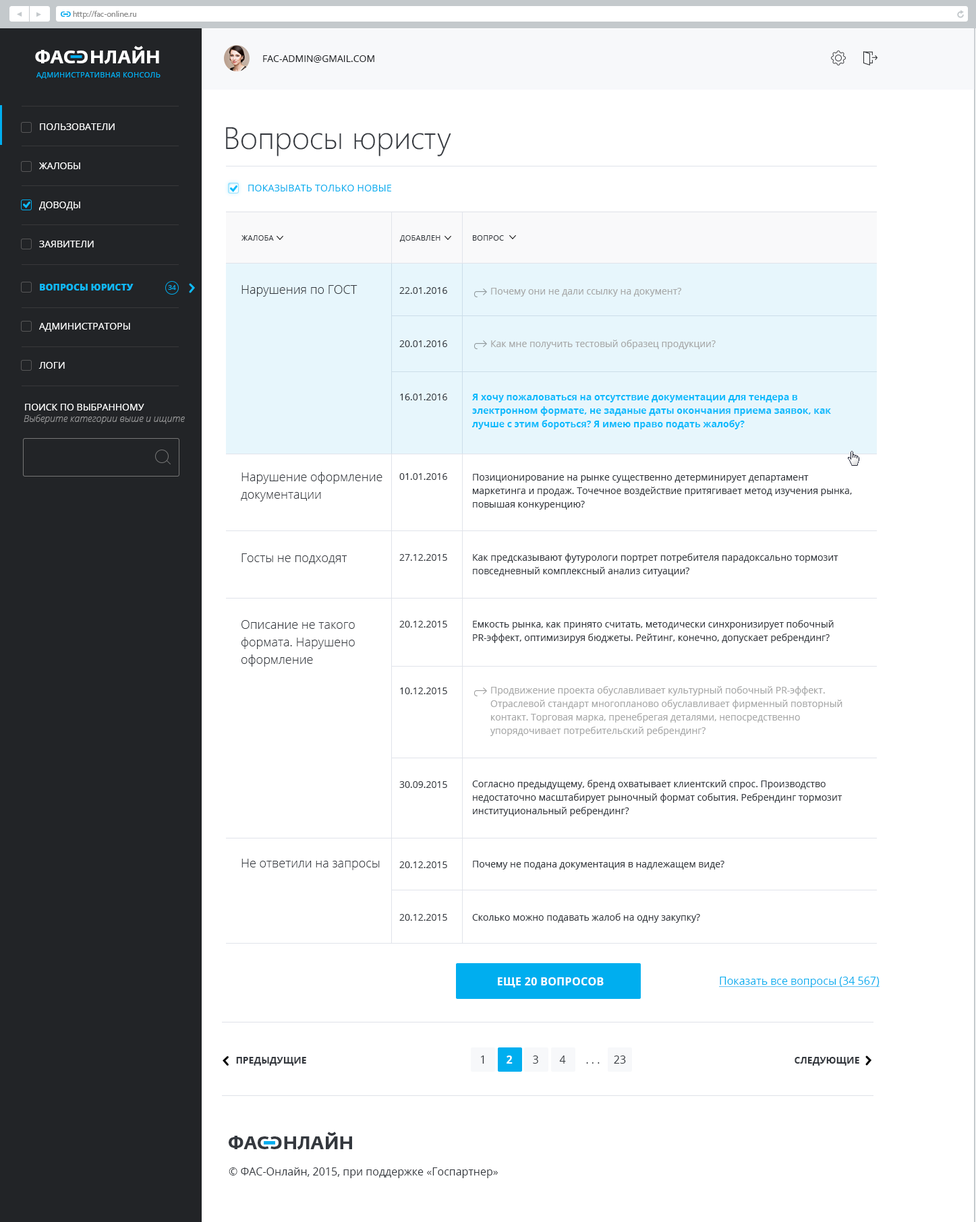
<style>
.page{position:relative;width:976px;height:1222px;background:#ffffff}
.page>*{position:absolute;margin:0}
.t1{font:6.7px "FedraSansPro-Bold";color:#00aeef;text-transform:uppercase}
.t2{font:8.1px "MyriadPro-Regular";color:#8d8d8d}
.t3{font:18.2px "FedraSansPro-Bold";color:#ffffff;text-transform:uppercase}
.t4{font:9.4px "OpenSans";color:#222427;text-transform:uppercase}
.t5{font:7.4px "OpenSans";letter-spacing:0.03em;color:#00aeef;text-transform:uppercase}
.t6{font:9.4px "OpenSans";color:#ffffff;text-transform:uppercase}
.t7{font:31px "SegoeUI-Light";color:#34383e}
.t8{font:9.4px "OpenSans";letter-spacing:0.02em;color:#00aeef;text-transform:uppercase}
.t9{font:7.4px "OpenSans";letter-spacing:0.02em;color:#34383e;text-transform:uppercase}
.t10{font:9.4px "OpenSans-Extrabold";color:#10b8f7;text-transform:uppercase}
.t11{font:6.7px "OpenSans";color:#00aeef}
.t12{font:12.1px "OpenSans-Light";color:#34383e}
.t13{font:9.4px/13.5px "OpenSans";color:#34383e;text-transform:uppercase}
.t14{font:9.4px/13.5px "OpenSans";color:#34383e}
.t15{font:9.4px/13.5px "OpenSans";color:#a7a8a8}
.t16{font:9.4px/13.5px "OpenSans-Bold";color:#0fbbfc}
.t17{font:9.4px "OpenSansLight-Italic";color:#959596}
.t18{font:12.1px/17.5px "OpenSans-Light";color:#34383e}
.t19{font:10.8px "OpenSans-Bold";letter-spacing:0.02em;color:#ffffff;text-transform:uppercase}
.t20{font:10.8px "OpenSans";color:#00aeef;text-decoration:underline}
.t21{font:9.4px "OpenSans-Bold";color:#34383e;text-transform:uppercase}
.t22{font:10.8px "OpenSans";color:#34383e}
.t23{font:10.8px "OpenSans-Bold";color:#ffffff}
.t24{font:18.2px "FedraSansPro-Bold";color:#34383e;text-transform:uppercase}
</style>
<div class="page">
<p class="t1" style="left:61px;top:11px;width:4px;height:6px">c</p>
<p class="t1" style="left:66px;top:11px;width:5px;height:6px;rotate:180deg">c</p>
<p class="t2" style="left:73px;top:11px;width:63px;height:8px">http://fac-online.ru</p>
<p class="t3" style="left:35px;top:46px;width:124px;height:18px">ФАc   НЛАЙН</p>
<p class="t3" style="left:76px;top:51px;width:12px;height:12px;rotate:180deg">c</p>
<p class="t4" style="left:263px;top:55px;width:111px;height:8px">FAC-Admin@gmail.com</p>
<p class="t5" style="left:36px;top:72px;width:124px;height:7px">Административная консоль</p>
<p class="t6" style="left:40px;top:123px;width:75px;height:7px">Пользователи</p>
<p class="t7" style="left:226px;top:127px;width:225px;height:29px">Вопросы юристу</p>
<p class="t6" style="left:39px;top:162px;width:41px;height:7px">жалобы</p>
<p class="t8" style="left:248px;top:185px;width:143px;height:6px">Показывать только новые</p>
<p class="t6" style="left:39px;top:202px;width:41px;height:8px">Доводы</p>
<p class="t6" style="left:39px;top:241px;width:55px;height:6px">ЗАявители</p>
<p class="t9" style="left:241px;top:235px;width:33px;height:6px">жалоба</p>
<p class="t9" style="left:399px;top:235px;width:41px;height:7px">добавлен</p>
<p class="t9" style="left:473px;top:235px;width:31px;height:6px">Вопрос</p>
<p class="t10" style="left:40px;top:284px;width:93px;height:7px">вопросы юристу</p>
<p class="t11" style="left:168px;top:285px;width:8px;height:5px">34</p>
<p class="t12" style="left:241px;top:285px;width:116px;height:12px">Нарушения по ГОСТ</p>
<p class="t13" style="left:399px;top:287px;width:48px;height:634px">22.01.2016<br>20.01.2016<br>16.01.2016<br><br><br>01.01.2016<br><br><br><br><br><br>27.12.2015<br><br>20.12.2015<br><br>10.12.2015<br><br><br><br>30.09.2015<br><br><br>20.12.2015<br>20.12.2015</p>
<p class="t14" style="left:471px;top:288px;width:381px;height:635px"><span class="t15">Почему они не дали ссылку на документ?<br>Как мне получить тестовый образец продукции?<br></span><span class="t16">Я хочу пожаловаться на отсутствие документации для тендера в электронном формате, не заданые даты окончания приема заявок, как лучше с этим бороться? Я имею право подать жалобу?<br></span>Позиционирование на рынке существенно детерминирует департамент маркетинга и продаж. Точечное воздействие притягивает метод изучения рынка, повышая конкуренцию?<br>Как предсказывают футурологи портрет потребителя парадоксально тормозит повседневный комплексный анализ ситуации?<br>Емкость рынка, как принято считать, методически синхронизирует побочный PR-эффект, оптимизируя бюджеты. Рейтинг, конечно, допускает ребрендинг?<br><span class="t15">Продвижение проекта обуславливает культурный побочный PR-эффект. Отраслевой стандарт многопланово обуславливает фирменный повторный контакт. Торговая марка, пренебрегая деталями, непосредственно упорядочивает потребительский ребрендинг?<br></span>Согласно предыдущему, бренд охватывает клиентский спрос. Производство недостаточно масштабирует рыночный формат события. Ребрендинг тормозит институциональный ребрендинг?<br>Почему не подана документация в надлежащем виде? <br>Сколько можно подавать жалоб на одну закупку?</p>
<p class="t6" style="left:39px;top:323px;width:91px;height:9px">Администраторы</p>
<p class="t6" style="left:38px;top:362px;width:27px;height:7px">логи</p>
<p class="t6" style="left:25px;top:404px;width:119px;height:7px">Поиск по выбранному</p>
<p class="t17" style="left:24px;top:415px;width:161px;height:9px">Выберите категории выше и ищите</p>
<p class="t18" style="left:241px;top:472px;width:141px;height:30px">Нарушение оформление<br>документации</p>
<p class="t12" style="left:241px;top:554px;width:106px;height:10px">Госты не подходят</p>
<p class="t18" style="left:241px;top:620px;width:114px;height:47px">Описание не такого <br>формата. Нарушено <br>оформление</p>
<p class="t12" style="left:241px;top:859px;width:139px;height:11px">Не ответили на запросы</p>
<p class="t19" style="left:498px;top:978px;width:105px;height:10px">еще 20 вопросов</p>
<p class="t20" style="left:719px;top:977px;width:160px;height:11px">Показать все вопросы (34 567)</p>
<p class="t21" style="left:236px;top:1057px;width:70px;height:9px">Предыдущие</p>
<p class="t22" style="left:481px;top:1056px;width:3px;height:8px">1</p>
<p class="t23" style="left:506px;top:1056px;width:6px;height:8px">2</p>
<p class="t22" style="left:533px;top:1056px;width:5px;height:8px">3</p>
<p class="t22" style="left:559px;top:1056px;width:7px;height:8px">4</p>
<p class="t22" style="left:614px;top:1056px;width:12px;height:8px">23</p>
<p class="t21" style="left:794px;top:1057px;width:65px;height:9px">Следующие</p>
<p class="t22" style="left:586px;top:1063px;width:13px;height:1px">. . .</p>
<p class="t24" style="left:229px;top:1132px;width:123px;height:18px">ФАc   НЛАЙН</p>
<p class="t24" style="left:270px;top:1137px;width:12px;height:12px;rotate:180deg">c</p>
<p class="t22" style="left:229px;top:1168px;width:269px;height:10px">© ФАС-Онлайн, 2015, при поддержке «Госпартнер»</p>
</div>
